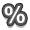
<style>
.page{position:relative;width:30px;height:30px;background:#ffffff}
.page>*{position:absolute;margin:0}
.t1{font:23.5px "PingFangHK-Semibold";color:#ffffff;text-transform:uppercase}
</style>
<div class="page">
<p class="t1" style="left:4px;top:5px;width:21px;height:19px">%</p>
</div>
